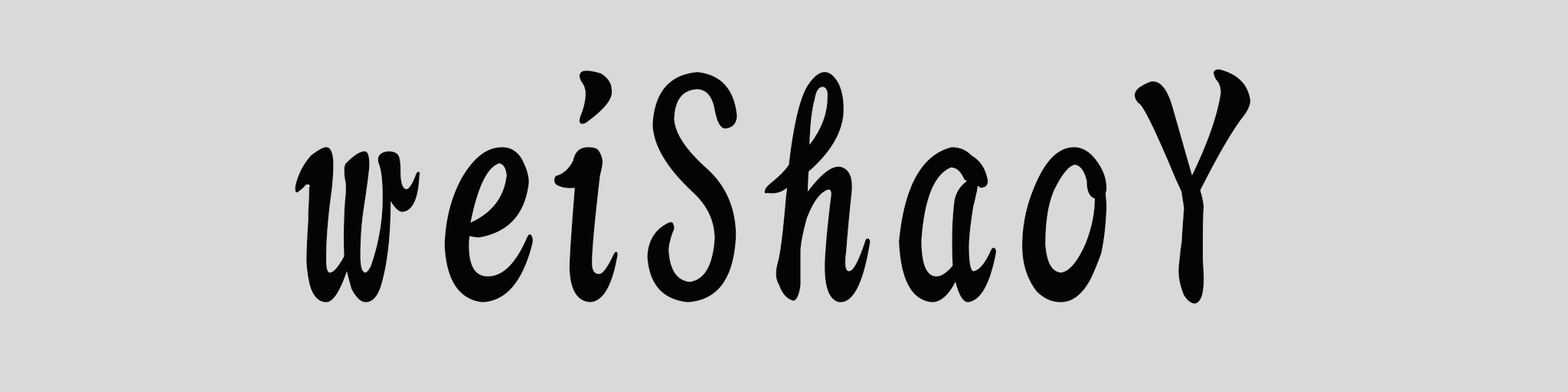
<style>
.page{position:relative;width:1568px;height:392px;background:#d9d9d7}
.page>*{position:absolute;margin:0}
.t1{font:344.5px "FZZJ-ZBQXWBJW--GB1-0";letter-spacing:0.05em;color:#040404;scale:0.67 1}
</style>
<div class="page">
<p class="t1" style="left:295px;top:69px;width:956px;height:235px">weiShaoY</p>
</div>
